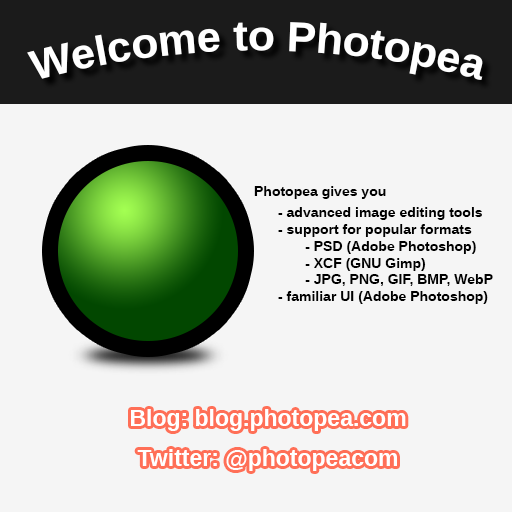
<style>
.page{position:relative;width:512px;height:512px;background:#f5f5f5}
.page>*{position:absolute;margin:0}
.t1{font:42px "LiberationSans-Bold";color:#ffffff}
.t2{font:14px "LiberationSans-Bold";color:#000000}
.t3{font:23px/40px "LiberationSans-Bold";color:#ffffff}
</style>
<div class="page">
<p class="t1" style="left:27px;top:22px;width:456px;height:58px">Welcome to Photopea</p>
<p class="t2" style="left:254px;top:186px;width:239px;height:118px">Photopea gives you<br>- advanced image editing tools<br>- support for popular formats<br>       - PSD (Adobe Photoshop)<br>       - XCF (GNU Gimp)<br>       - JPG, PNG, GIF, BMP, WebP<br>- familiar UI (Adobe Photoshop)</p>
<p class="t3" style="left:131px;top:409px;width:275px;height:62px;text-align:center">Blog: blog.photopea.com<br>Twitter: @photopeacom</p>
</div>
